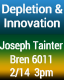
<style>
.page{position:relative;width:64px;height:80px}
.page>*{position:absolute;margin:0}
.t1{font:12px "Roboto-Regular";letter-spacing:-0.03em;color:#fbfbfb;font-weight:bold}
.t2{font:11px "RobotoCondensed-Regular";letter-spacing:-0.03em;color:#fbfbfb;font-weight:bold}
</style>
<div class="page">
<p class="t1" style="left:2px;top:3px;width:61px;height:25px;text-align:center">Depletion &amp;<br>Innovation</p>
<p class="t2" style="left:0px;top:40px;width:63px;height:12px">Joseph Tainter</p>
<p class="t2" style="left:10px;top:55px;width:43px;height:24px;text-align:center">Bren 6011<br>2/14  3pm</p>
</div>
